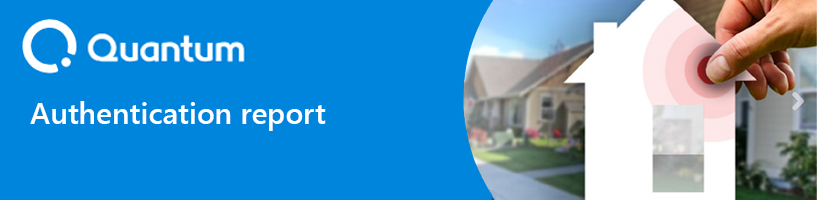
<style>
.page{position:relative;width:817px;height:200px;background:#0085dd}
.page>*{position:absolute;margin:0}
.t1{font:30px "SegoeUI-Semibold";color:#ffffff}
</style>
<div class="page">
<p class="t1" style="left:30px;top:101px;width:296px;height:30px">Authentication report</p>
</div>
